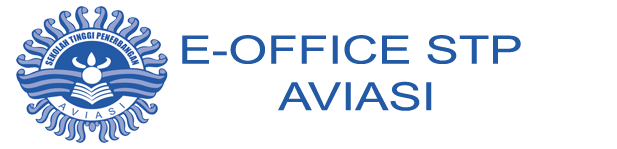
<style>
.page{position:relative;width:617px;height:149px;background:#ffffff}
.page>*{position:absolute;margin:0}
.t1{font:38.9px "ArialMT";color:#235aa6;scale:1.28 1}
</style>
<div class="page">
<p class="t1" style="left:182px;top:35px;width:339px;height:76px;text-align:center">E-OFFICE STP <br>AVIASI</p>
</div>
